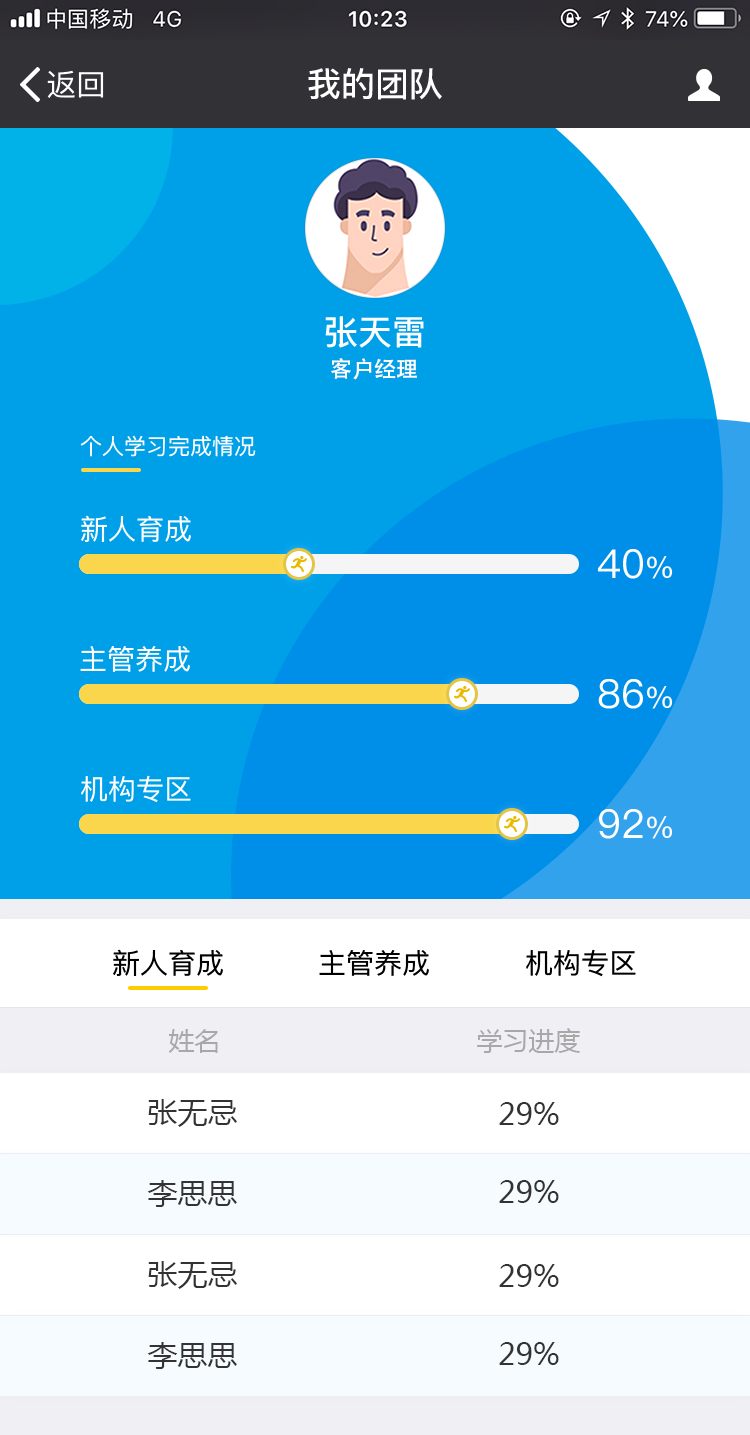
<style>
.page{position:relative;width:750px;height:1435px;background:#00a0e9}
.page>*{position:absolute;margin:0}
.t1{font:30px "PingFangSC-Regular";color:#ffffff}
.t2{font:34px "PingFangSC-Medium";color:#ffffff}
.t3{font:22px "AdobeHeitiStd-Regular";color:#ffffff}
.t4{font:22px "PingFangSC-Regular";color:#ffffff}
.t5{font:28px "PingFangSC-Regular";color:#ffffff}
.t6{font:40px "PingFangSC-Regular";color:#ffffff}
.t7{font:28px "PingFangSC-Regular";color:#000000}
.t8{font:26px "MicrosoftYaHei";color:#a8a8a8}
.t9{font:30px "MicrosoftYaHei";color:#333333}
</style>
<div class="page">
<p class="t1" style="left:47px;top:70px;width:57px;height:28px">返回</p>
<p class="t2" style="left:308px;top:68px;width:134px;height:32px">我的团队</p>
<p class="t2" style="left:325px;top:316px;width:99px;height:32px">张天雷</p>
<p class="t3" style="left:331px;top:358px;width:86px;height:22px">客户经理</p>
<p class="t4" style="left:80px;top:435px;width:176px;height:22px">个人学习完成情况</p>
<p class="t5" style="left:81px;top:515px;width:110px;height:27px">新人育成</p>
<p class="t6" style="left:598px;top:549px;width:75px;height:30px">40<span class="t1">%</span></p>
<p class="t5" style="left:80px;top:646px;width:110px;height:26px">主管养成</p>
<p class="t6" style="left:598px;top:679px;width:75px;height:30px">86<span class="t1">%</span></p>
<p class="t5" style="left:81px;top:775px;width:110px;height:28px">机构专区</p>
<p class="t6" style="left:599px;top:809px;width:74px;height:30px">92<span class="t1">%</span></p>
<p class="t7" style="left:113px;top:949px;width:110px;height:27px">新人育成</p>
<p class="t7" style="left:319px;top:950px;width:110px;height:26px">主管养成</p>
<p class="t7" style="left:526px;top:949px;width:110px;height:28px">机构专区</p>
<p class="t8" style="left:168px;top:1029px;width:50px;height:24px">姓名</p>
<p class="t8" style="left:477px;top:1028px;width:103px;height:25px">学习进度</p>
<p class="t9" style="left:148px;top:1099px;width:89px;height:28px">张无忌</p>
<p class="t9" style="left:499px;top:1102px;width:60px;height:23px">29%</p>
<p class="t9" style="left:147px;top:1180px;width:90px;height:27px">李思思</p>
<p class="t9" style="left:499px;top:1180px;width:60px;height:23px">29%</p>
<p class="t9" style="left:148px;top:1261px;width:89px;height:28px">张无忌</p>
<p class="t9" style="left:499px;top:1264px;width:60px;height:23px">29%</p>
<p class="t9" style="left:147px;top:1342px;width:90px;height:27px">李思思</p>
<p class="t9" style="left:499px;top:1342px;width:60px;height:23px">29%</p>
</div>
